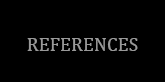
<style>
.page{position:relative;width:165px;height:82px;background:#000000}
.page>*{position:absolute;margin:0}
.t1{font:19.1px "Cambria";color:#999999}
</style>
<div class="page">
<p class="t1" style="left:27px;top:38px;width:111px;height:13px">REFERENCES</p>
</div>
